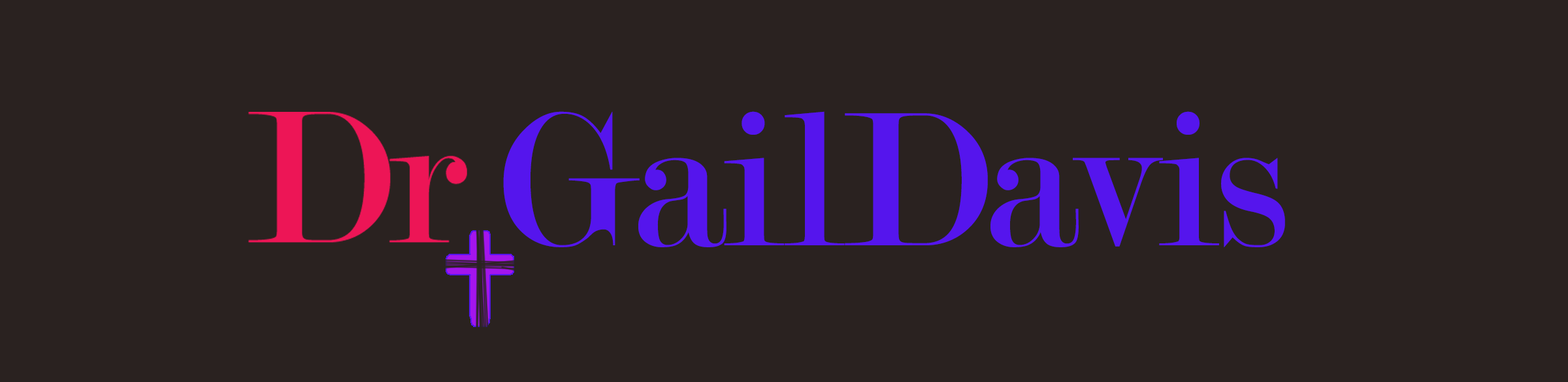
<style>
.page{position:relative;width:1568px;height:382px;background:#2a2220}
.page>*{position:absolute;margin:0}
.t1{font:204.2px "Modern-Regular";letter-spacing:-0.025em;color:#5515ed}
</style>
<div class="page">
<p class="t1" style="left:503px;top:111px;width:782px;height:136px">GailDavis</p>
</div>
